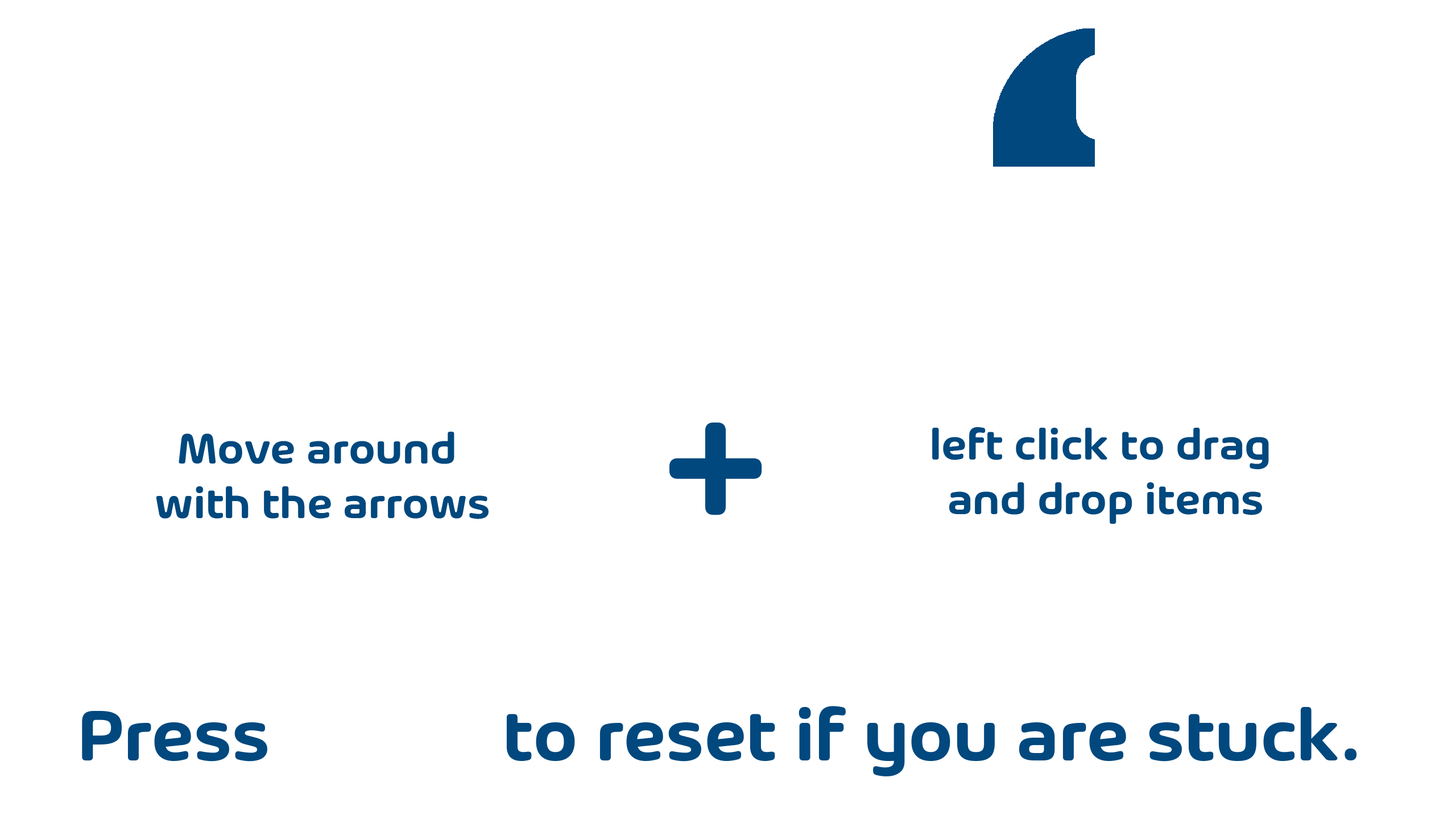
<style>
.page{position:relative;width:1456px;height:819px;background:#ffffff}
.page>*{position:absolute;margin:0}
.t1{font:177.8px "Arlon-SemiBold";color:#00487e}
.t2{font:45.7px "Arlon-SemiBold";color:#00487e}
.t3{font:45.6px "Arlon-SemiBold";color:#00487e}
.t4{font:76.3px "Arlon-SemiBold";color:#00487e}
</style>
<div class="page">
<p class="t1" style="left:669px;top:422px;width:93px;height:93px">+</p>
<p class="t2" style="left:156px;top:432px;width:333px;height:87px;text-align:center">Move around <br>with the arrows</p>
<p class="t3" style="left:932px;top:427px;width:337px;height:97px;text-align:center">left click to drag <br>and drop items</p>
<p class="t4" style="left:82px;top:706px;width:1275px;height:70px">Press             to reset if you are stuck.</p>
</div>
